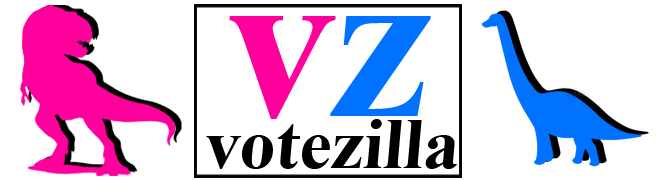
<style>
.page{position:relative;width:668px;height:180px;background:#ffffff}
.page>*{position:absolute;margin:0}
.t1{font:220px "TimesNewRomanPS-BoldMT";color:#ff009c}
.t2{font:220px "TimesNewRomanPS-BoldMT";color:#0072ff}
.t3{font:72px "TimesNewRomanPS-BoldMT";color:#000000}
</style>
<div class="page">
<p class="t1" style="left:229px;top:16px;width:202px;height:103px">v<span class="t2">z</span></p>
<p class="t3" style="left:206px;top:119px;width:251px;height:50px">votezilla</p>
</div>
